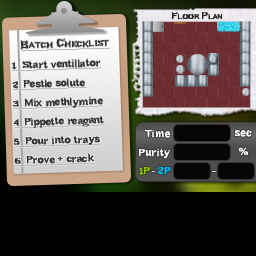
<style>
.page{position:relative;width:256px;height:256px;background:#000000}
.page>*{position:absolute;margin:0}
.t1{font:10px "Bundy-Regular";letter-spacing:-0.01em;color:#282828;font-variant:small-caps;font-weight:bold}
.t2{font:12px "Bundy-Regular";color:#353535;font-variant:small-caps;font-weight:bold;text-decoration:underline}
.t3{font:10px/19px "Bundy-Regular";color:#353535;font-weight:bold;text-decoration:underline}
.t4{font:10px/19px "Bundy-Regular";letter-spacing:-0.01em;color:#353535;font-weight:bold;text-decoration:underline}
.t5{font:10px "Bundy-Regular";letter-spacing:0.025em;color:#ffffff;font-weight:bold}
.t6{font:10px "Bundy-Regular";letter-spacing:0.015em;color:#ffffff;font-weight:bold}
.t7{font:13px "Bundy-Regular";letter-spacing:0.025em;color:#ffffff;font-weight:bold}
.t8{font:11px "Bundy-Regular";letter-spacing:0.02em;color:#8ec600;font-weight:bold}
.t9{font:10px "Bundy-Regular";letter-spacing:0.02em;color:#8ec600;font-weight:bold}
.t10{font:8px "Bundy-Regular";letter-spacing:0.02em;color:#ffffff;font-weight:bold}
.t11{font:11px "Bundy-Regular";letter-spacing:0.02em;color:#00bfff;font-weight:bold}
.t12{font:10px "Bundy-Regular";letter-spacing:0.02em;color:#00bfff;font-weight:bold}
.t13{font:12px "Bundy-Regular";letter-spacing:0.025em;color:#ffffff;font-weight:bold;scale:0.95 1}
</style>
<div class="page">
<p class="t1" style="left:171px;top:12px;width:52px;height:8px">Floor Plan</p>
<p class="t1" style="left:171px;top:12px;width:52px;height:8px">Floor Plan</p>
<p class="t2" style="left:20px;top:38px;width:90px;height:13px;rotate:-2deg">Batch Checklist</p>
<p class="t2" style="left:20px;top:38px;width:90px;height:13px;rotate:-2deg">Batch Checklist</p>
<p class="t3" style="left:11px;top:58px;width:94px;height:108px;rotate:-2deg">1  Start ventillator<br>2  Pestle solute<br>3  Mix methlymine<br>4  <span class="t4">Pippette reagant<br></span>5  Pour into trays<br>6  Prove + crack</p>
<p class="t3" style="left:11px;top:58px;width:94px;height:108px;rotate:-2deg">1  Start ventillator<br>2  Pestle solute<br>3  Mix methlymine<br>4  <span class="t4">Pippette reagant<br></span>5  Pour into trays<br>6  Prove + crack</p>
<p class="t5" style="left:144px;top:129px;width:27px;height:9px">Time</p>
<p class="t5" style="left:144px;top:129px;width:27px;height:9px">Time</p>
<p class="t5" style="left:234px;top:130px;width:18px;height:7px">sec</p>
<p class="t5" style="left:234px;top:130px;width:18px;height:7px">sec</p>
<p class="t6" style="left:138px;top:148px;width:33px;height:11px">Purity</p>
<p class="t6" style="left:138px;top:148px;width:33px;height:11px">Purity</p>
<p class="t7" style="left:238px;top:147px;width:11px;height:9px">%</p>
<p class="t7" style="left:238px;top:147px;width:11px;height:9px">%</p>
<p class="t8" style="left:138px;top:166px;width:33px;height:9px">1<span class="t9">P </span><span class="t10">- </span><span class="t11">2</span><span class="t12">P</span></p>
<p class="t13" style="left:212px;top:171px;width:4px;height:1px">-</p>
</div>
